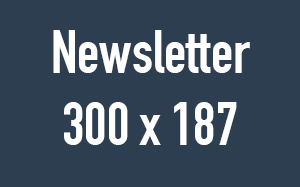
<style>
.page{position:relative;width:300px;height:187px;background:#2c3e50}
.page>*{position:absolute;margin:0}
.t1{font:60px "DINCondensed-Bold";color:#ffffff}
</style>
<div class="page">
<p class="t1" style="left:53px;top:30px;width:197px;height:115px;text-align:center">Newsletter<br>300 x 187</p>
</div>
